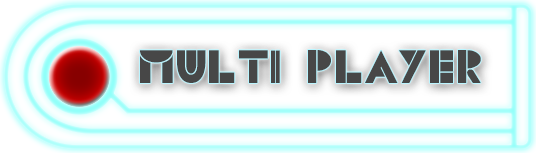
<style>
.page{position:relative;width:536px;height:153px}
.page>*{position:absolute;margin:0}
.t1{font:48px "CSBlocks";color:#474747}
</style>
<div class="page">
<p class="t1" style="left:140px;top:50px;width:341px;height:33px">multi player</p>
</div>
